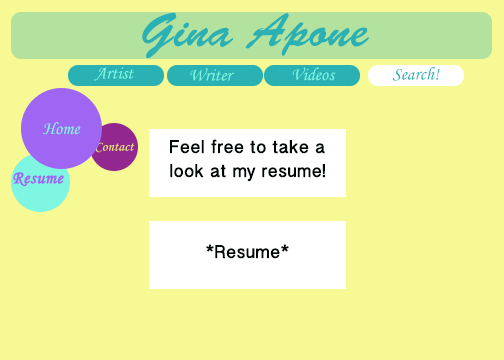
<style>
.page{position:relative;width:504px;height:360px;background:#f7fa94}
.page>*{position:absolute;margin:0}
.t1{font:48px "BrushScriptStd";color:#29b1b3}
.t2{font:18px "MonotypeCorsiva";color:#7ef6e2}
.t3{font:18px "MonotypeCorsiva";color:#29b1b3}
.t4{font:14px "MonotypeCorsiva";color:#eef275}
.t5{font:18px/24px "BanglaSangamMN";color:#010908;font-weight:bold}
.t6{font:18px "MonotypeCorsiva";color:#9e66f2;font-weight:bold}
.t7{font:18px "BanglaSangamMN";color:#010908;font-weight:bold}
</style>
<div class="page">
<p class="t1" style="left:142px;top:12px;width:227px;height:47px">Gina Apone</p>
<p class="t2" style="left:94px;top:67px;width:40px;height:14px">Artist</p>
<p class="t2" style="left:190px;top:68px;width:44px;height:14px">Writer</p>
<p class="t2" style="left:292px;top:67px;width:44px;height:14px">Videos</p>
<p class="t3" style="left:392px;top:67px;width:48px;height:14px">Search!</p>
<p class="t2" style="left:43px;top:122px;width:38px;height:13px">Home</p>
<p class="t4" style="left:95px;top:142px;width:40px;height:11px">Contact</p>
<p class="t5" style="left:170px;top:139px;width:155px;height:42px;text-align:center">Feel free to take a look at my resume!</p>
<p class="t6" style="left:13px;top:172px;width:51px;height:15px">Resume</p>
<p class="t7" style="left:206px;top:244px;width:83px;height:15px">*Resume*</p>
</div>
